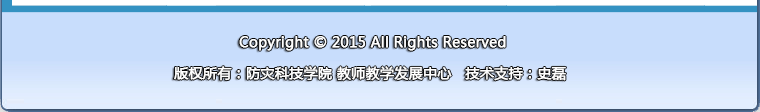
<style>
.page{position:relative;width:760px;height:112px;background:#c8ddfc}
.page>*{position:absolute;margin:0}
.t1{font:14px "MicrosoftYaHei";color:#ffffff;font-weight:bold}
</style>
<div class="page">
<p class="t1" style="left:239px;top:36px;width:267px;height:15px">Copyright © 2015 All Rights Reserved</p>
<p class="t1" style="left:174px;top:66px;width:392px;height:15px">版权所有：防灾科技学院 教师教学发展中心   技术支持：史磊</p>
</div>
